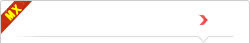
<style>
.page{position:relative;width:250px;height:43px;background:#ffffff}
.page>*{position:absolute;margin:0}
.t1{font:12px "¿¬Ìå-Regular";letter-spacing:0.1em;color:#ffff00;font-weight:bold;scale:1.25 1}
</style>
<div class="page">
<p class="t1" style="left:4px;top:4px;width:18px;height:17px;rotate:-45deg">MX</p>
</div>
